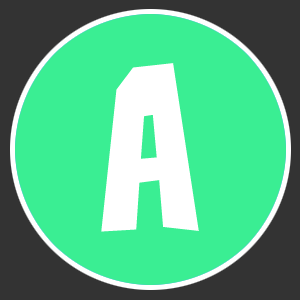
<style>
.page{position:relative;width:300px;height:300px;background:#3aee93}
.page>*{position:absolute;margin:0}
.t1{font:205px "Kaiju-Monster__G";color:#ffffff;scale:1.22 1}
</style>
<div class="page">
<p class="t1" style="left:101px;top:63px;width:98px;height:169px">A</p>
</div>
